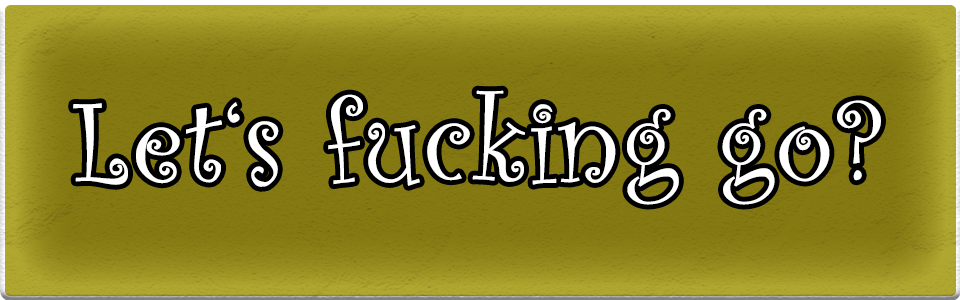
<style>
.page{position:relative;width:960px;height:300px}
.page>*{position:absolute;margin:0}
.t1{font:120px "CurlzMT";color:#ffffff;font-weight:bold}
</style>
<div class="page">
<p class="t1" style="left:73px;top:90px;width:808px;height:115px">Let‘s fucking go?</p>
</div>
